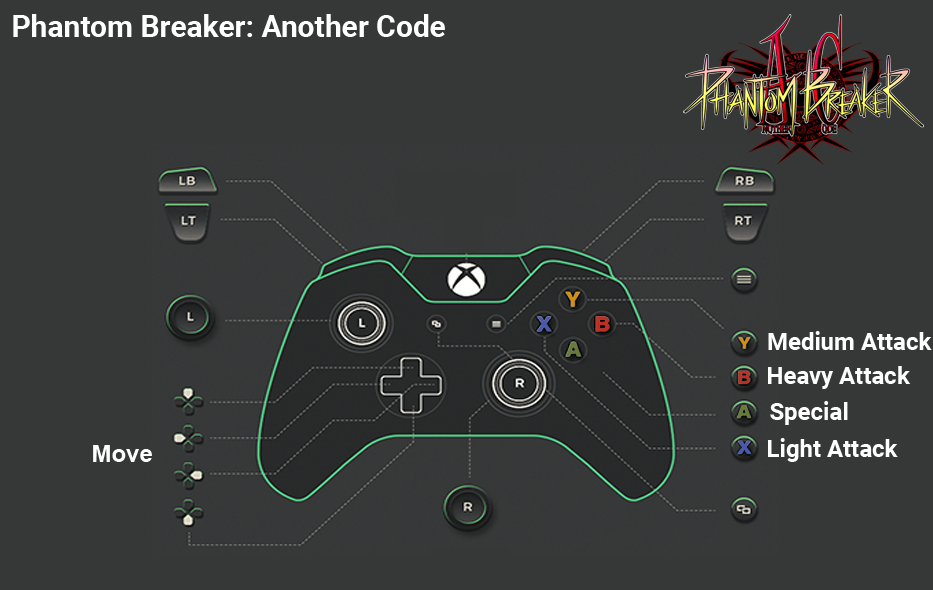
<style>
.page{position:relative;width:933px;height:590px;background:#363838}
.page>*{position:absolute;margin:0}
.t1{font:30px "Roboto-Bold";color:#ffffff}
.t2{font:24px "Roboto-Bold";color:#ffffff}
.t3{font:24px "Arial-BoldMT";color:#fefefe}
</style>
<div class="page">
<p class="t1" style="left:13px;top:14px;width:432px;height:23px">Phantom Breaker: Another Code</p>
<p class="t2" style="left:768px;top:331px;width:164px;height:19px">Medium Attack</p>
<p class="t2" style="left:768px;top:366px;width:143px;height:23px">Heavy Attack</p>
<p class="t2" style="left:770px;top:401px;width:78px;height:24px">Special</p>
<p class="t2" style="left:768px;top:438px;width:130px;height:24px">Light Attack</p>
<p class="t3" style="left:93px;top:445px;width:59px;height:17px">Move</p>
</div>
